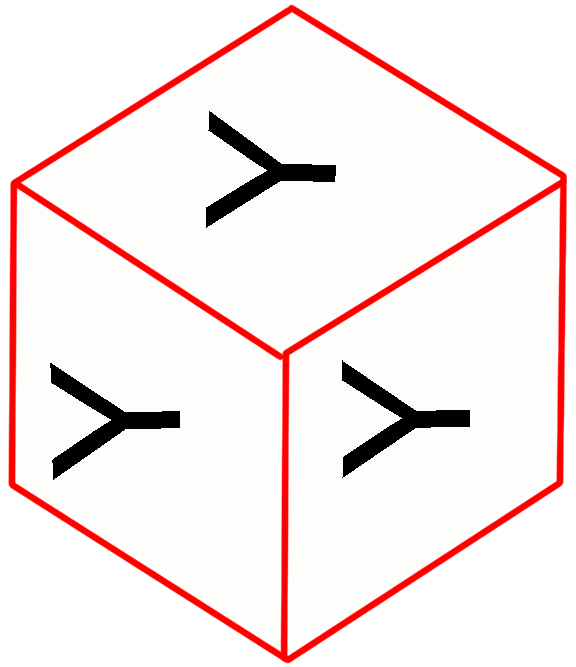
<style>
.page{position:relative;width:576px;height:667px;background:#fdfdfc}
.page>*{position:absolute;margin:0}
.t1{font:179.3px "ArialMT";color:#000000}
</style>
<div class="page">
<p class="t1" style="left:206px;top:111px;width:130px;height:117px;rotate:-88deg">Y</p>
<p class="t1" style="left:50px;top:363px;width:130px;height:117px;rotate:-91deg">Y</p>
<p class="t1" style="left:342px;top:360px;width:128px;height:118px;rotate:-91deg">Y</p>
</div>
